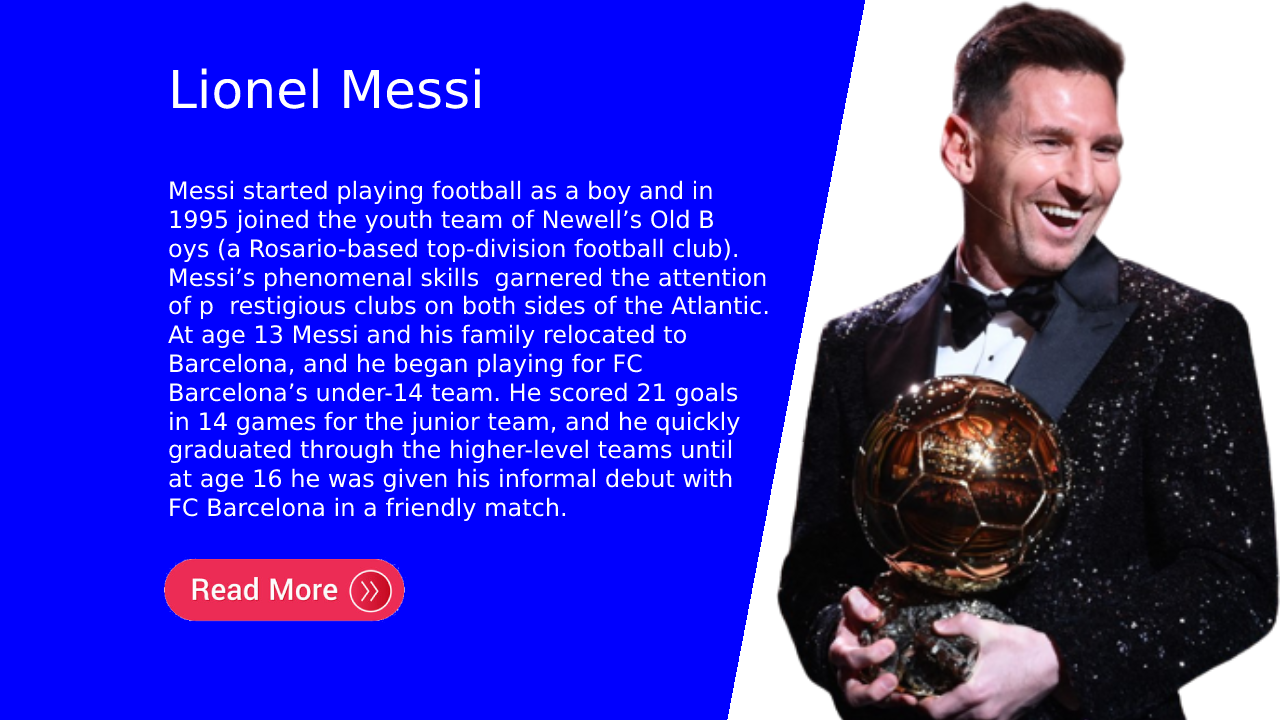
<style>
.page{position:relative;width:1280px;height:720px;background:#0000ff}
.page>*{position:absolute;margin:0}
.t1{font:24px "DejaVuSans";color:#ffffff}
.t2{font:52px "DejaVuSans";color:#ffffff}
</style>
<div class="page">
<p class="t1" style="left:168px;top:68px;width:600px;height:453px"><span class="t2">Lionel Messi<br><br></span>Messi started playing football as a boy and in <br>1995 joined the youth team of Newell’s Old B<br>oys (a Rosario-based top-division football club). <br>Messi’s phenomenal skills  garnered the attention <br>of p  restigious clubs on both sides of the Atlantic.<br>At age 13 Messi and his family relocated to <br>Barcelona, and he began playing for FC <br>Barcelona’s under-14 team. He scored 21 goals <br>in 14 games for the junior team, and he quickly <br>graduated through the higher-level teams until <br>at age 16 he was given his informal debut with <br>FC Barcelona in a friendly match.</p>
</div>
